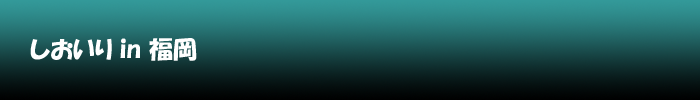
<style>
.page{position:relative;width:700px;height:100px}
.page>*{position:absolute;margin:0}
.t1{font:24px "HGPSoeiKakupoptai";color:#ffffff}
</style>
<div class="page">
<p class="t1" style="left:30px;top:38px;width:167px;height:23px">しおいり in 福岡</p>
</div>
